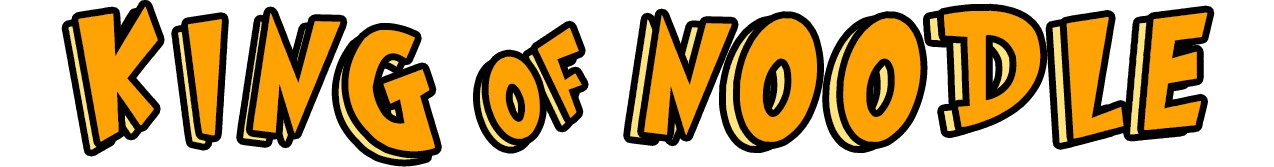
<style>
.page{position:relative;width:1274px;height:167px;background:#ffffff}
.page>*{position:absolute;margin:0}
.t1{font:144.4px "Grinched";color:#ffa304}
.t2{font:144.4px "Grinched"}
.t3{font:95.5px "Grinched";color:#ffa304}
</style>
<div class="page">
<p class="t1" style="left:78px;top:6px;width:357px;height:146px">K I N G</p>
<p class="t2" style="left:68px;top:15px;width:358px;height:145px">K I N G</p>
<p class="t1" style="left:644px;top:10px;width:564px;height:132px">N O O D L E</p>
<p class="t3" style="left:488px;top:27px;width:94px;height:112px;rotate:-23deg">O F</p>
</div>
